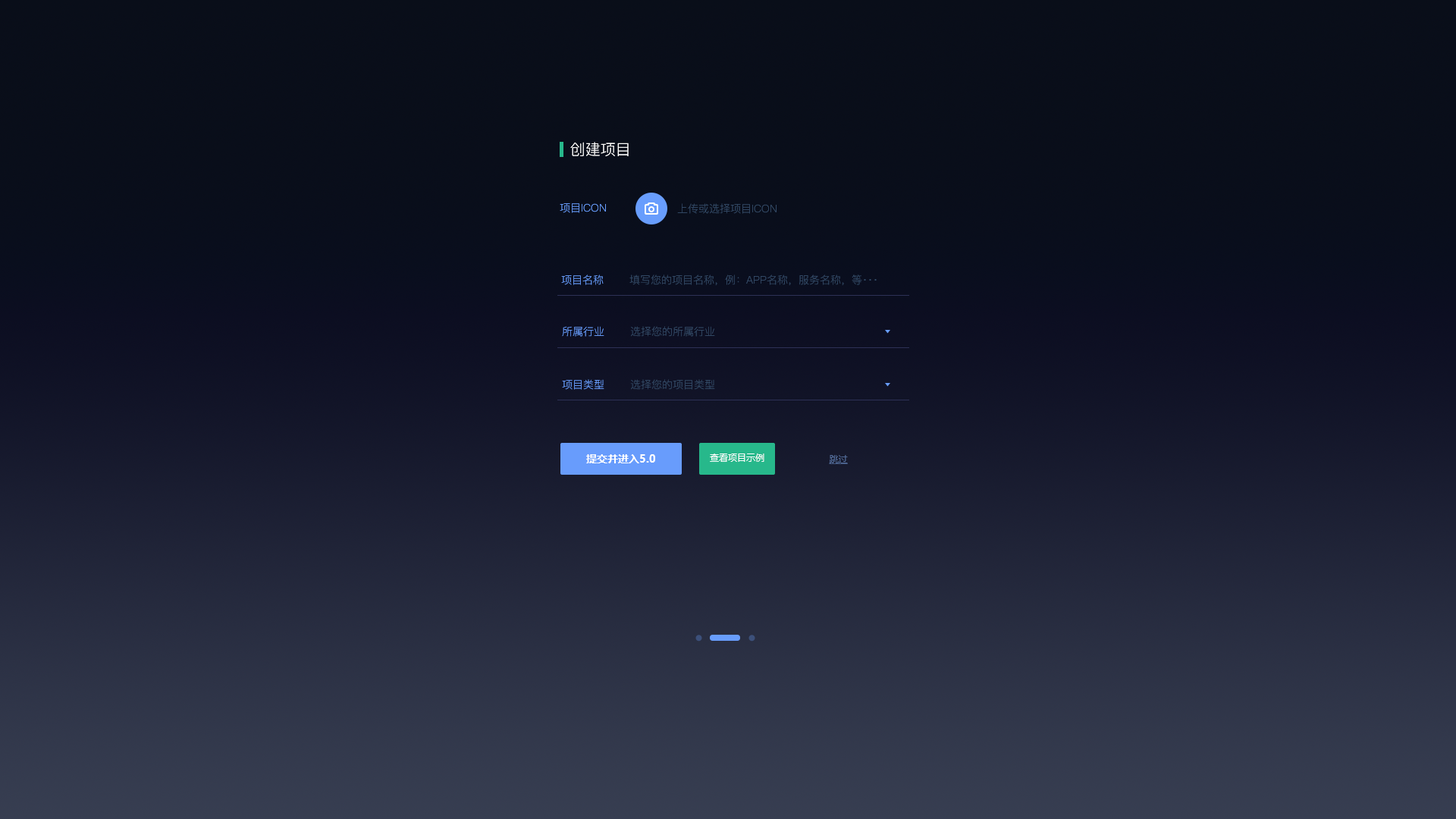
<style>
.page{position:relative;width:1456px;height:819px}
.page>*{position:absolute;margin:0}
.t1{font:15.2px "PingFang-SC-Regular";color:#ffffff}
.t2{font:10.6px "PingFang-SC-Regular";color:#689dfd}
.t3{font:10.6px "PingFang-SC-Regular";color:#334a67}
.t4{font:10.6px "MicrosoftYaHei-Bold";color:#ffffff}
.t5{font:9.1px "MicrosoftYaHei";color:#ffffff}
.t6{font:9.1px "MicrosoftYaHei";color:#516a97;text-decoration:underline}
</style>
<div class="page">
<p class="t1" style="left:570px;top:142px;width:59px;height:14px">创建项目</p>
<p class="t2" style="left:560px;top:203px;width:46px;height:10px">项目ICON</p>
<p class="t3" style="left:677px;top:203px;width:100px;height:11px">上传或选择项目ICON</p>
<p class="t2" style="left:561px;top:275px;width:43px;height:10px">项目名称</p>
<p class="t3" style="left:629px;top:275px;width:248px;height:10px">填写您的项目名称，例：APP名称，服务名称，等···</p>
<p class="t2" style="left:562px;top:326px;width:42px;height:11px">所属行业</p>
<p class="t3" style="left:630px;top:326px;width:85px;height:11px">选择您的所属行业</p>
<p class="t2" style="left:562px;top:379px;width:42px;height:11px">项目类型</p>
<p class="t3" style="left:630px;top:379px;width:85px;height:11px">选择您的项目类型</p>
<p class="t4" style="left:586px;top:454px;width:69px;height:9px">提交并进入5.0</p>
<p class="t5" style="left:710px;top:453px;width:54px;height:9px">查看项目示例</p>
<p class="t6" style="left:829px;top:455px;width:19px;height:9px">跳过</p>
</div>
